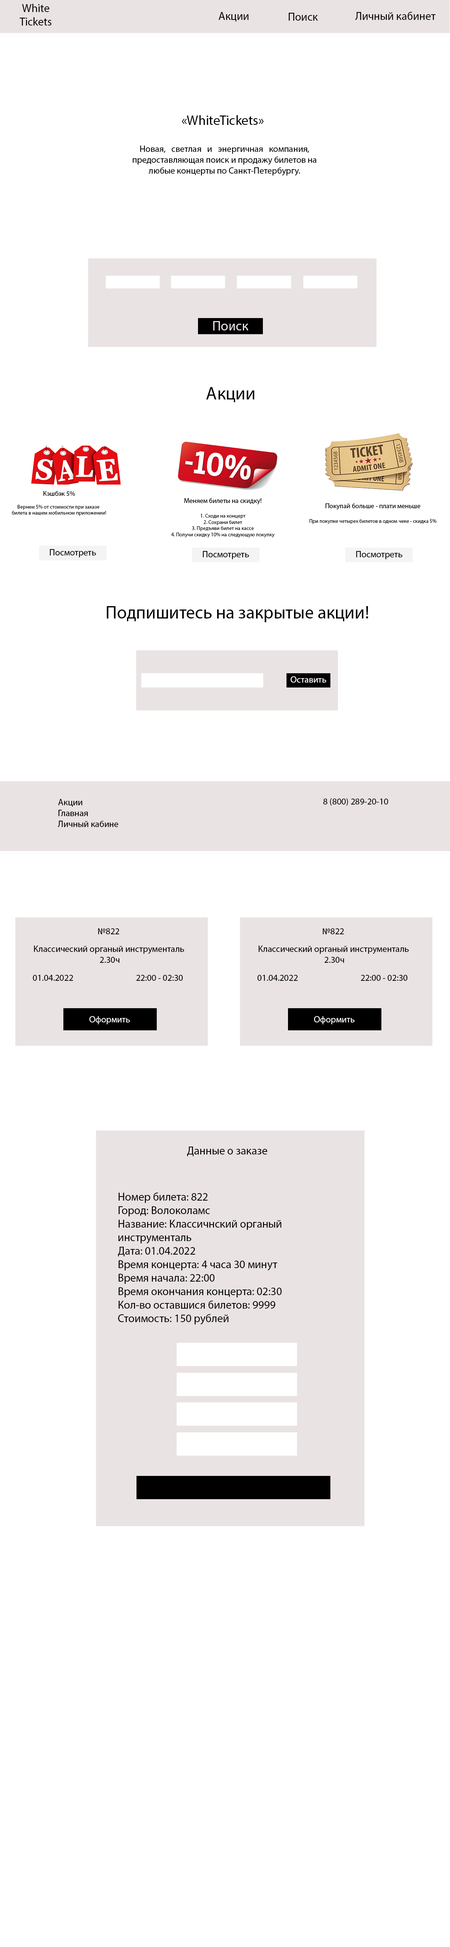
<style>
.page{position:relative;width:450px;height:1947px;background:#ffffff}
.page>*{position:absolute;margin:0}
.t1{font:11.3px "MyriadPro-Regular";color:#000000}
.t2{font:9px "MyriadPro-Regular";color:#000000}
.t3{font:13.5px "MyriadPro-Regular";color:#000000}
.t4{font:13.5px "MyriadPro-Regular";color:#eae3e3}
.t5{font:18px "MyriadPro-Regular";color:#000000}
.t6{font:5.2px "MyriadPro-Regular";color:#000000}
.t7{font:6.7px "MyriadPro-Regular";color:#000000}
.t8{font:9px "MyriadPro-Regular";color:#ffffff}
</style>
<div class="page">
<p class="t1" style="left:20px;top:4px;width:31px;height:22px;text-align:center">White<br>Tickets</p>
<p class="t1" style="left:219px;top:12px;width:30px;height:10px">Акции</p>
<p class="t1" style="left:289px;top:13px;width:29px;height:8px">Поиск</p>
<p class="t1" style="left:355px;top:12px;width:81px;height:8px">Личный кабинет</p>
<p class="t2" style="left:133px;top:115px;width:184px;height:61px;text-align:center"><span class="t3">«WhiteTickets»  <br><br></span>Новая,   светлая   и   энергичная   компания, <br>предоставляющая поиск и продажу билетов на <br>любые концерты по Санкт-Петербургу.</p>
<p class="t4" style="left:213px;top:321px;width:36px;height:9px">Поиск</p>
<p class="t5" style="left:206px;top:387px;width:48px;height:15px">Акции</p>
<p class="t6" style="left:12px;top:491px;width:94px;height:25px;text-align:center"><span class="t7">Кэшбэк 5%<br></span><br>Вернем 5% от стоимости при заказе <br>билета в нашем мобильном приложении!</p>
<p class="t6" style="left:171px;top:498px;width:104px;height:40px;text-align:center"><span class="t7">Меняем билеты на скидку!<br><br></span>1. Сходи на концерт<br>2. Сохрани билет<br>3. Предъяви билет на кассе<br>4. Получи скидку 10% на следующую покупку</p>
<p class="t6" style="left:309px;top:503px;width:128px;height:21px;text-align:center"><span class="t7">Покупай больше - плати меньше<br><br></span>При покупке четырех билетов в одном чеке - скидка 5%</p>
<p class="t2" style="left:50px;top:549px;width:46px;height:8px">Посмотреть</p>
<p class="t2" style="left:203px;top:551px;width:46px;height:8px">Посмотреть</p>
<p class="t2" style="left:356px;top:551px;width:46px;height:8px">Посмотреть</p>
<p class="t5" style="left:107px;top:606px;width:261px;height:16px">Подпишитесь на закрытые акции!</p>
<p class="t8" style="left:291px;top:676px;width:35px;height:7px">Оставить</p>
<p class="t2" style="left:58px;top:799px;width:61px;height:28px">Акции<br>Главная<br>Личный кабине</p>
<p class="t2" style="left:323px;top:798px;width:65px;height:8px">8 (800) 289-20-10</p>
<p class="t2" style="left:98px;top:928px;width:21px;height:6px">№822</p>
<p class="t2" style="left:323px;top:928px;width:21px;height:6px">№822</p>
<p class="t2" style="left:34px;top:945px;width:150px;height:18px;text-align:center">Классический органый инструменталь <br>2.30ч</p>
<p class="t2" style="left:258px;top:945px;width:151px;height:18px;text-align:center">Классический органый инструменталь <br>2.30ч</p>
<p class="t2" style="left:33px;top:975px;width:40px;height:6px">01.04.2022</p>
<p class="t2" style="left:136px;top:975px;width:47px;height:6px">22:00 - 02:30</p>
<p class="t2" style="left:257px;top:975px;width:41px;height:6px">01.04.2022</p>
<p class="t2" style="left:361px;top:975px;width:47px;height:6px">22:00 - 02:30</p>
<p class="t8" style="left:89px;top:1016px;width:41px;height:8px">Оформить</p>
<p class="t8" style="left:314px;top:1016px;width:41px;height:8px">Оформить</p>
<p class="t1" style="left:187px;top:1146px;width:80px;height:10px">Данные о заказе</p>
<p class="t1" style="left:118px;top:1192px;width:164px;height:133px">Номер билета: 822<br>Город: Волоколамс<br>Название: Классичнский органый <br>инструменталь<br>Дата: 01.04.2022<br>Время концерта: 4 часа 30 минут<br>Время начала: 22:00<br>Время окончания концерта: 02:30<br>Кол-во оставшися билетов: 9999<br>Стоимость: 150 рублей</p>
</div>
